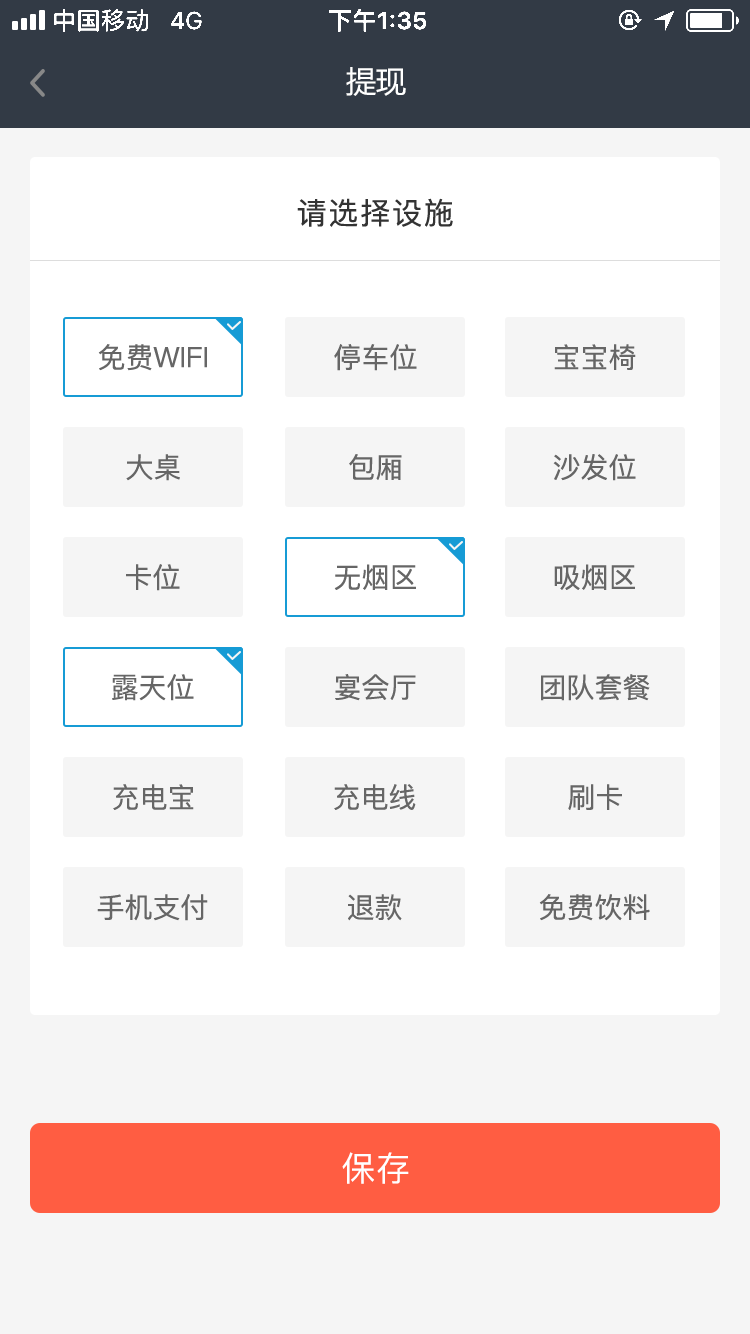
<style>
.page{position:relative;width:750px;height:1334px;background:#f5f5f5}
.page>*{position:absolute;margin:0}
.t1{font:30px "MicrosoftYaHeiUI";color:#ffffff}
.t2{font:30px "PingFangSC-Regular";letter-spacing:0.06em;color:#333333}
.t3{font:28px "PingFangSC-Regular";color:#666666}
.t4{font:34px "PingFang-SC-Medium";letter-spacing:0.02em;color:#ffffff}
</style>
<div class="page">
<p class="t1" style="left:346px;top:67px;width:60px;height:29px">提现</p>
<p class="t2" style="left:297px;top:198px;width:156px;height:29px">请选择设施</p>
<p class="t3" style="left:98px;top:344px;width:109px;height:27px">免费WIFI</p>
<p class="t3" style="left:334px;top:344px;width:83px;height:27px">停车位</p>
<p class="t3" style="left:554px;top:344px;width:82px;height:26px">宝宝椅</p>
<p class="t3" style="left:126px;top:454px;width:54px;height:27px">大桌</p>
<p class="t3" style="left:349px;top:454px;width:53px;height:26px">包厢</p>
<p class="t3" style="left:553px;top:454px;width:83px;height:27px">沙发位</p>
<p class="t3" style="left:126px;top:564px;width:54px;height:27px">卡位</p>
<p class="t3" style="left:334px;top:564px;width:82px;height:26px">无烟区</p>
<p class="t3" style="left:554px;top:564px;width:81px;height:26px">吸烟区</p>
<p class="t3" style="left:112px;top:674px;width:82px;height:27px">露天位</p>
<p class="t3" style="left:335px;top:674px;width:81px;height:27px">宴会厅</p>
<p class="t3" style="left:541px;top:674px;width:109px;height:27px">团队套餐</p>
<p class="t3" style="left:113px;top:784px;width:81px;height:26px">充电宝</p>
<p class="t3" style="left:334px;top:784px;width:82px;height:26px">充电线</p>
<p class="t3" style="left:568px;top:784px;width:54px;height:26px">刷卡</p>
<p class="t3" style="left:97px;top:894px;width:111px;height:27px">手机支付</p>
<p class="t3" style="left:348px;top:894px;width:54px;height:27px">退款</p>
<p class="t3" style="left:539px;top:894px;width:111px;height:27px">免费饮料</p>
<p class="t4" style="left:342px;top:1152px;width:67px;height:32px">保存</p>
</div>
